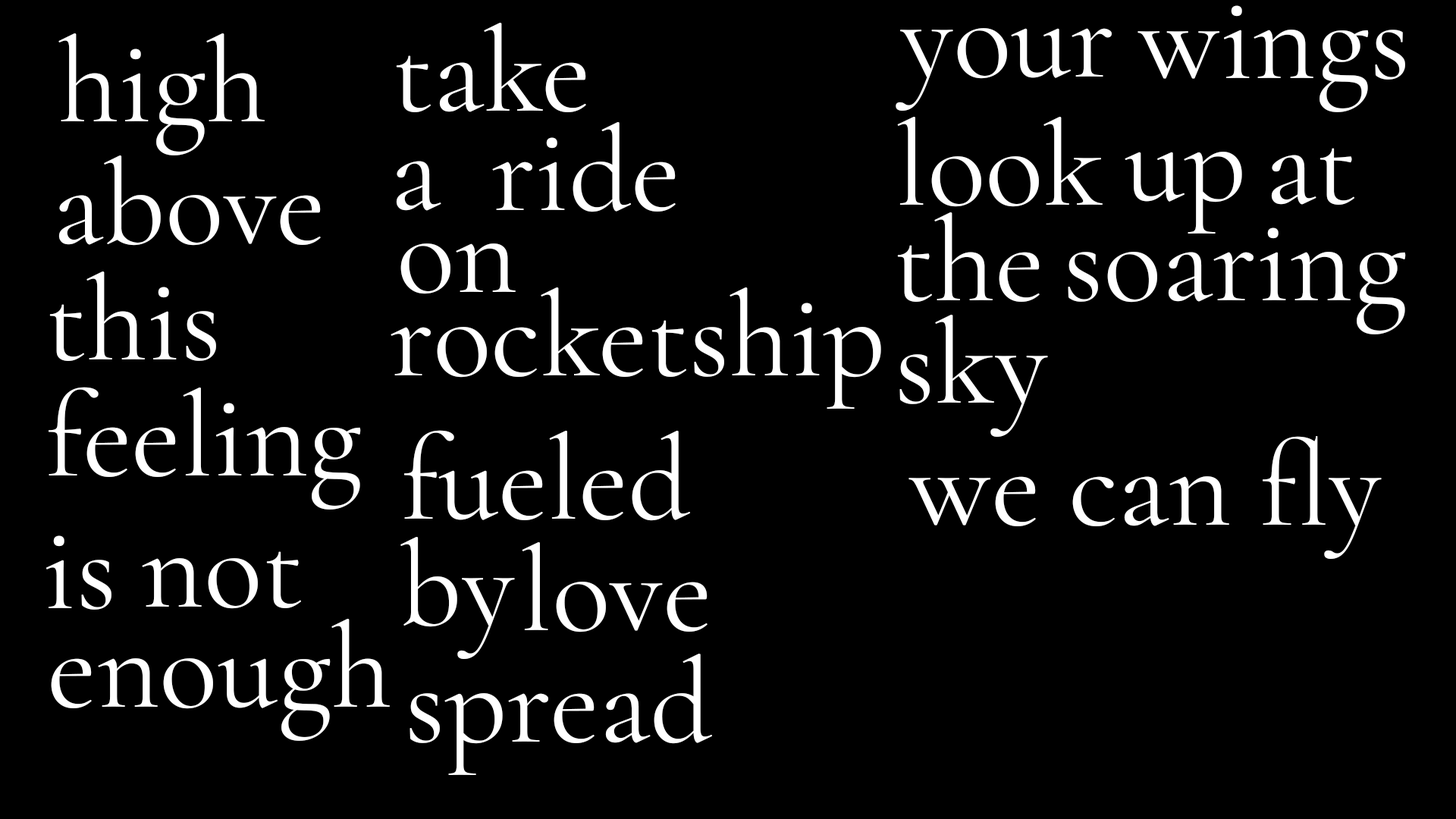
<style>
.page{position:relative;width:1456px;height:819px;background:#000000}
.page>*{position:absolute;margin:0}
.t1{font:121.3px "CormorantGaramond-Regular";color:#ffffff}
</style>
<div class="page">
<p class="t1" style="left:1137px;top:5px;width:268px;height:107px">wings</p>
<p class="t1" style="left:396px;top:23px;width:190px;height:89px">take</p>
<p class="t1" style="left:896px;top:28px;width:216px;height:83px">your</p>
<p class="t1" style="left:58px;top:33px;width:207px;height:122px">high</p>
<p class="t1" style="left:492px;top:122px;width:184px;height:90px">ride</p>
<p class="t1" style="left:897px;top:117px;width:206px;height:90px">look</p>
<p class="t1" style="left:1271px;top:148px;width:83px;height:57px">at</p>
<p class="t1" style="left:58px;top:155px;width:263px;height:91px">above</p>
<p class="t1" style="left:396px;top:161px;width:45px;height:50px">a</p>
<p class="t1" style="left:1125px;top:152px;width:117px;height:82px">up</p>
<p class="t1" style="left:897px;top:212px;width:143px;height:90px">the</p>
<p class="t1" style="left:1068px;top:227px;width:338px;height:107px">soaring</p>
<p class="t1" style="left:400px;top:243px;width:116px;height:51px">on</p>
<p class="t1" style="left:49px;top:271px;width:167px;height:90px">this</p>
<p class="t1" style="left:391px;top:287px;width:490px;height:122px">rocketship</p>
<p class="t1" style="left:899px;top:315px;width:149px;height:122px">sky</p>
<p class="t1" style="left:49px;top:387px;width:312px;height:123px">feeling</p>
<p class="t1" style="left:404px;top:430px;width:286px;height:91px">fueled</p>
<p class="t1" style="left:908px;top:436px;width:474px;height:123px">we can fly</p>
<p class="t1" style="left:46px;top:535px;width:65px;height:75px">is</p>
<p class="t1" style="left:400px;top:537px;width:115px;height:122px">by</p>
<p class="t1" style="left:522px;top:542px;width:186px;height:90px">love</p>
<p class="t1" style="left:142px;top:551px;width:159px;height:58px">not</p>
<p class="t1" style="left:51px;top:619px;width:339px;height:122px">enough</p>
<p class="t1" style="left:409px;top:654px;width:303px;height:121px">spread</p>
</div>
